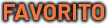
<style>
.page{position:relative;width:108px;height:24px;background:#ee7744}
.page>*{position:absolute;margin:0}
.t1{font:22.7px "Barlow-Bold";letter-spacing:0.017em;color:#ee7744}
</style>
<div class="page">
<p class="t1" style="left:4px;top:3px;width:100px;height:18px">FAVORITO</p>
</div>
